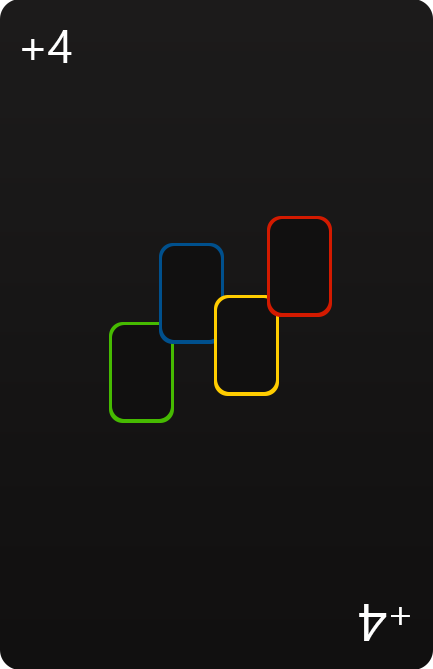
<style>
.page{position:relative;width:433px;height:669px}
.page>*{position:absolute;margin:0}
.t1{font:45.8px "NirmalaUI";color:#ffffff}
.t2{font:40.4px "NirmalaUI";color:#ffffff}
.t3{font:53.5px "NirmalaUI";color:#ffffff}
</style>
<div class="page">
<p class="t1" style="left:22px;top:30px;width:50px;height:33px">+4</p>
<p class="t2" style="left:359px;top:604px;width:51px;height:37px;rotate:180deg">+<span class="t3">4</span></p>
</div>
